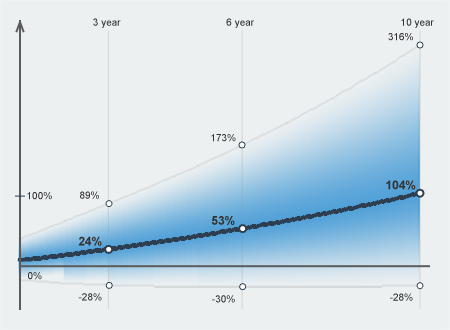
<style>
.page{position:relative;width:450px;height:330px;background:#ecf0f1}
.page>*{position:absolute;margin:0}
.t1{font:10px "ArialMT";color:#333333}
.t2{font:12px "Arial-BoldMT";color:#333333}
</style>
<div class="page">
<p class="t1" style="left:93px;top:18px;width:28px;height:10px">3 year</p>
<p class="t1" style="left:226px;top:18px;width:28px;height:10px">6 year</p>
<p class="t1" style="left:401px;top:18px;width:33px;height:10px">10 year</p>
<p class="t1" style="left:388px;top:33px;width:25px;height:8px">316%</p>
<p class="t1" style="left:211px;top:134px;width:25px;height:8px">173%</p>
<p class="t2" style="left:386px;top:180px;width:30px;height:10px">104%</p>
<p class="t1" style="left:27px;top:192px;width:25px;height:8px">100%</p>
<p class="t1" style="left:80px;top:191px;width:19px;height:8px">89%</p>
<p class="t2" style="left:211px;top:216px;width:24px;height:9px">53%</p>
<p class="t2" style="left:78px;top:236px;width:24px;height:10px">24%</p>
<p class="t1" style="left:28px;top:272px;width:14px;height:8px">0%</p>
<p class="t1" style="left:78px;top:293px;width:24px;height:8px">-28%</p>
<p class="t1" style="left:390px;top:293px;width:23px;height:8px">-28%</p>
<p class="t1" style="left:212px;top:295px;width:23px;height:8px">-30%</p>
</div>
